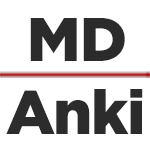
<style>
.page{position:relative;width:150px;height:150px;background:#ffffff}
.page>*{position:absolute;margin:0}
.t1{font:61.6px "Gotham-Black";letter-spacing:-0.02em;color:#2b2b2b}
.t2{font:61.6px "Gotham-Black";letter-spacing:-0.02em;color:#2c2c2c}
</style>
<div class="page">
<p class="t1" style="left:30px;top:18px;width:95px;height:43px">MD</p>
<p class="t2" style="left:6px;top:89px;width:137px;height:45px">Anki</p>
</div>
